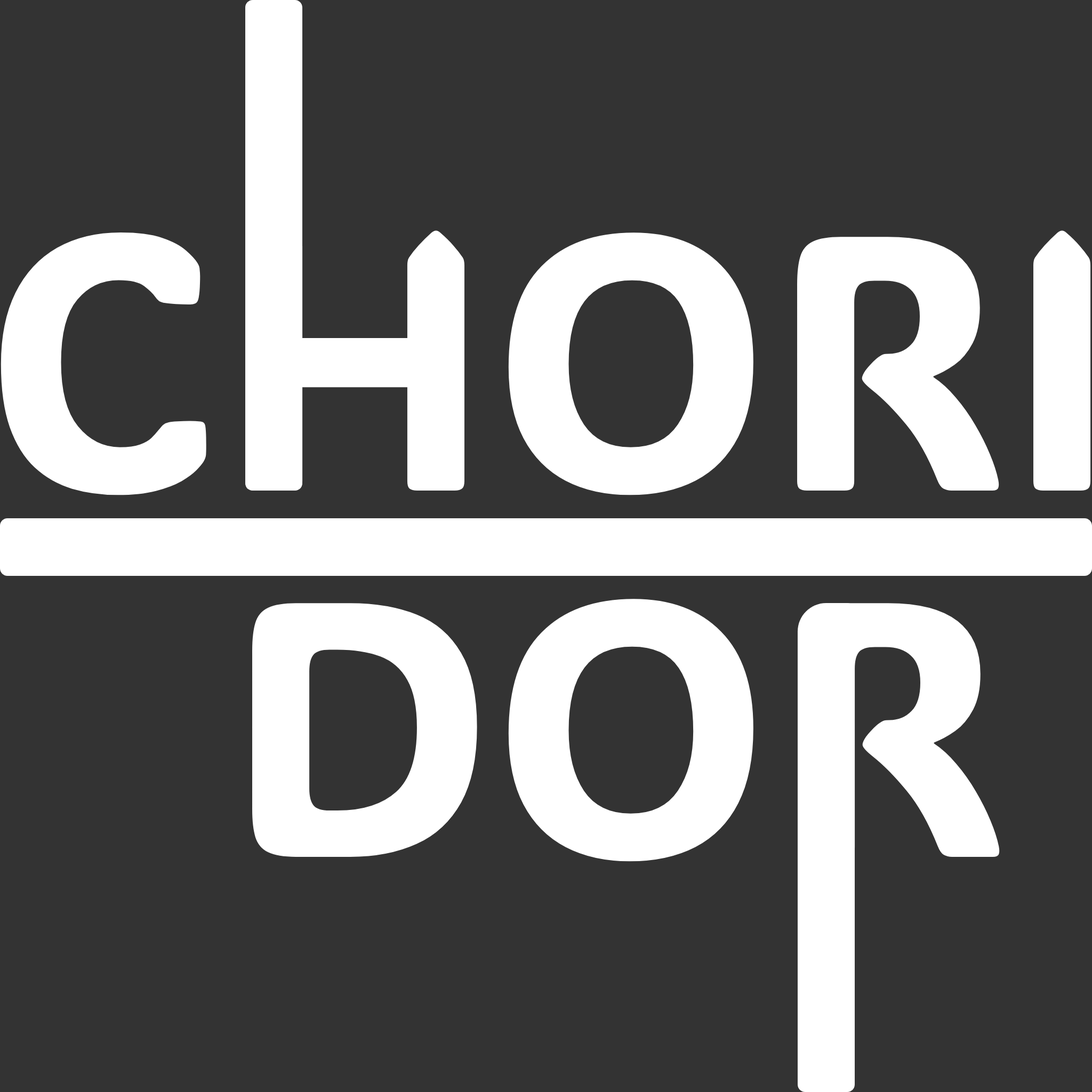
<style>
.page{position:relative;width:1092px;height:1092px;background:#333333}
.page>*{position:absolute;margin:0}
.t1{font:362.3px "ADLaMDisplay-Regular";color:#ffffff}
</style>
<div class="page">
<p class="t1" style="left:1px;top:230px;width:1090px;height:265px">CHORI</p>
<p class="t1" style="left:252px;top:599px;width:748px;height:263px">DOR</p>
</div>
